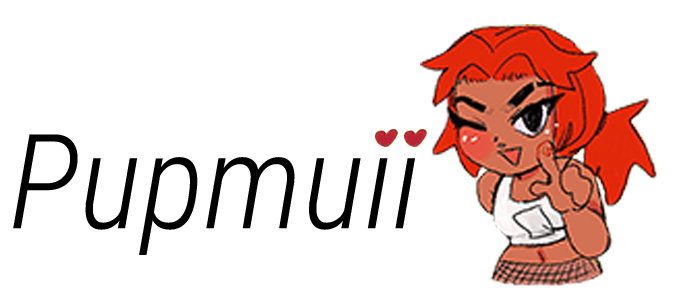
<style>
.page{position:relative;width:685px;height:302px;background:#ffffff}
.page>*{position:absolute;margin:0}
.t1{font:132px "RobotoCondensed-LightItalic";color:#000000}
</style>
<div class="page">
<p class="t1" style="left:13px;top:132px;width:407px;height:123px">Pupmuii</p>
</div>
